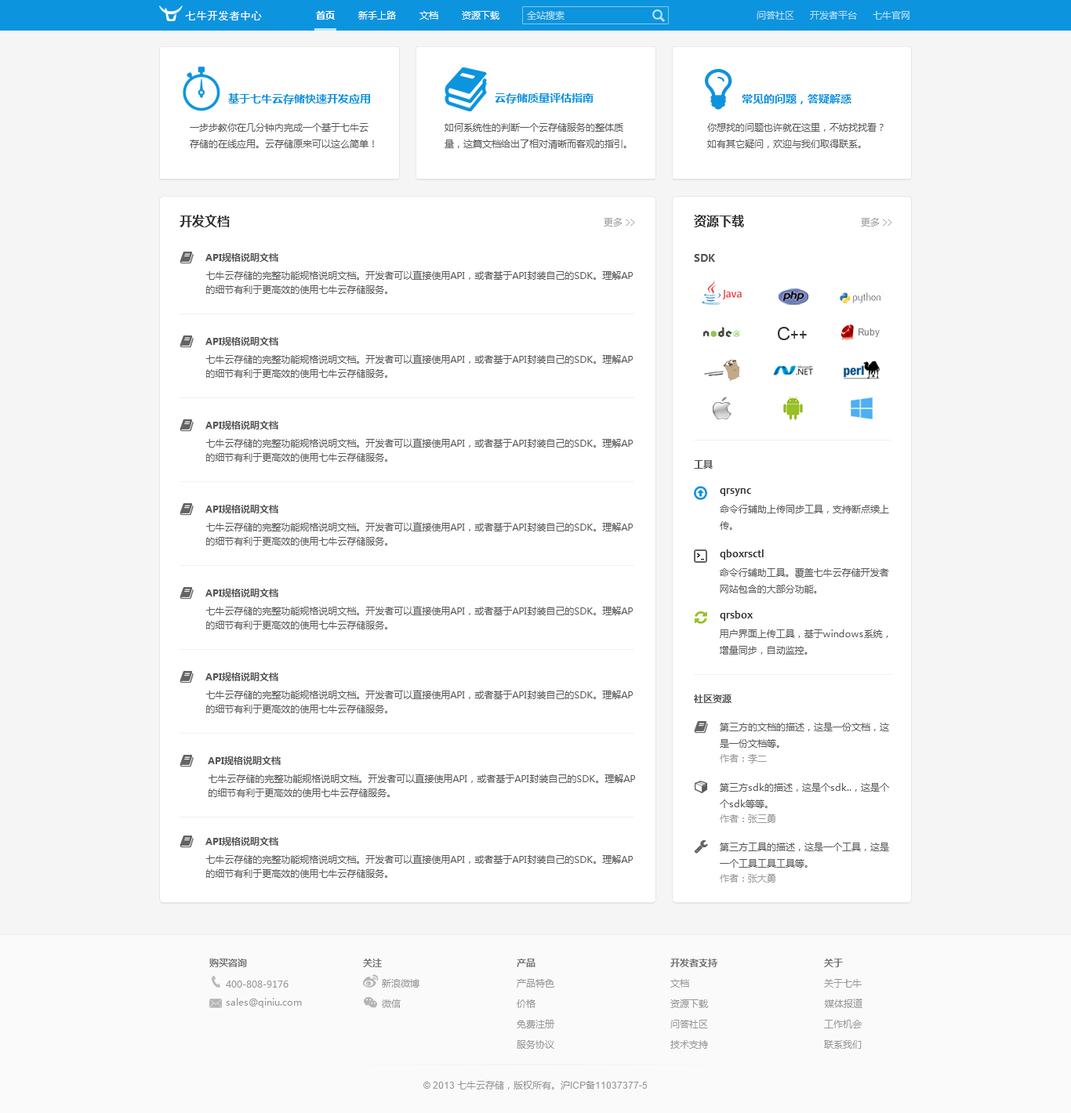
<style>
.page{position:relative;width:1071px;height:1113px;background:#ffffff}
.page>*{position:absolute;margin:0}
.t1{font:11px "SimHei";color:#ffffff}
.t2{font:9.4px "MicrosoftYaHei-Bold";color:#ffffff}
.t3{font:9.4px "MicrosoftYaHei";color:#ffffff}
.t4{font:9.4px "MicrosoftYaHei";color:#b7dff5}
.t5{font:11px "MicrosoftYaHei-Bold";color:#0c94de}
.t6{font:9.4px "MicrosoftYaHei";color:#585858}
.t7{font:12.5px "MicrosoftYaHei-Bold";color:#323232}
.t8{font:9.4px "MicrosoftYaHei";color:#a0a0a0}
.t9{font:9.4px "SimHei";color:#a0a0a0}
.t10{font:9.4px "MicrosoftYaHei-Bold";color:#585858}
.t11{font:10.2px "MicrosoftYaHei-Bold";color:#585858}
.t12{font:9.4px/14.1px "MicrosoftYaHei";color:#585858}
.t13{font:18.8px "ArialMT";color:#323232}
.t14{font:9.4px "ArialMT";color:#808080}
.t15{font:14.1px "ArialMT";color:#323232}
.t16{font:11px "Candara-Bold";color:#323232}
.t17{font:9.4px "MicrosoftYaHei";color:#999999}
.t18{font:9.4px "MicrosoftYaHei-Bold";color:#787878}
.t19{font:9.4px "MicrosoftYaHei";color:#969696}
.t20{font:9.4px "ArialMT";color:#969696}
</style>
<div class="page">
<p class="t1" style="left:185px;top:11px;width:77px;height:10px">七牛开发者中心</p>
<p class="t2" style="left:316px;top:11px;width:19px;height:9px">首页</p>
<p class="t3" style="left:358px;top:11px;width:38px;height:9px">新手上路</p>
<p class="t3" style="left:419px;top:11px;width:19px;height:9px">文档</p>
<p class="t3" style="left:462px;top:11px;width:37px;height:9px">资源下载</p>
<p class="t4" style="left:527px;top:11px;width:38px;height:9px">全站搜索</p>
<p class="t4" style="left:757px;top:11px;width:37px;height:9px">问答社区</p>
<p class="t4" style="left:810px;top:11px;width:47px;height:9px">开发者平台</p>
<p class="t4" style="left:873px;top:11px;width:37px;height:9px">七牛官网</p>
<p class="t5" style="left:228px;top:93px;width:142px;height:11px">基于七牛云存储快速开发应用</p>
<p class="t5" style="left:495px;top:93px;width:99px;height:10px">云存储质量评估指南</p>
<p class="t5" style="left:742px;top:94px;width:109px;height:10px">常见的问题，答疑解惑</p>
<p class="t6" style="left:190px;top:123px;width:184px;height:25px">一步步教你在几分钟内完成一个基于七牛云<br>存储的在线应用。云存储原来可以这么简单！</p>
<p class="t6" style="left:445px;top:123px;width:181px;height:26px">如何系统性的判断一个云存储服务的整体质<br>量，这篇文档给出了相对清晰而客观的指引。</p>
<p class="t6" style="left:707px;top:123px;width:177px;height:25px">你想找的问题也许就在这里，不妨找找看？<br>如有其它疑问，欢迎与我们取得联系。</p>
<p class="t7" style="left:180px;top:215px;width:50px;height:12px">开发文档</p>
<p class="t8" style="left:604px;top:218px;width:31px;height:9px">更多 <span class="t9">&gt;&gt;</span></p>
<p class="t7" style="left:694px;top:215px;width:50px;height:12px">资源下载</p>
<p class="t8" style="left:861px;top:218px;width:31px;height:9px">更多 <span class="t9">&gt;&gt;</span></p>
<p class="t10" style="left:205px;top:253px;width:73px;height:9px">API规格说明文档</p>
<p class="t11" style="left:694px;top:254px;width:21px;height:8px">SDK</p>
<p class="t12" style="left:205px;top:270px;width:428px;height:24px">七牛云存储的完整功能规格说明文档。开发者可以直接使用API，或者基于API封装自己的SDK。理解AP<br>的细节有利于更高效的使用七牛云存储服务。</p>
<p class="t13" style="left:778px;top:327px;width:12px;height:13px">C</p>
<p class="t14" style="left:859px;top:329px;width:21px;height:8px">Ruby</p>
<p class="t10" style="left:205px;top:337px;width:73px;height:9px">API规格说明文档</p>
<p class="t15" style="left:791px;top:331px;width:16px;height:8px">++</p>
<p class="t12" style="left:205px;top:354px;width:428px;height:24px">七牛云存储的完整功能规格说明文档。开发者可以直接使用API，或者基于API封装自己的SDK。理解AP<br>的细节有利于更高效的使用七牛云存储服务。</p>
<p class="t10" style="left:205px;top:421px;width:73px;height:9px">API规格说明文档</p>
<p class="t12" style="left:205px;top:438px;width:428px;height:24px">七牛云存储的完整功能规格说明文档。开发者可以直接使用API，或者基于API封装自己的SDK。理解AP<br>的细节有利于更高效的使用七牛云存储服务。</p>
<p class="t10" style="left:694px;top:460px;width:19px;height:9px">工具</p>
<p class="t16" style="left:720px;top:488px;width:31px;height:8px">qrsync</p>
<p class="t10" style="left:205px;top:505px;width:73px;height:9px">API规格说明文档</p>
<p class="t6" style="left:720px;top:505px;width:169px;height:25px">命令行辅助上传同步工具，支持断点续上<br>传。</p>
<p class="t12" style="left:205px;top:522px;width:428px;height:24px">七牛云存储的完整功能规格说明文档。开发者可以直接使用API，或者基于API封装自己的SDK。理解AP<br>的细节有利于更高效的使用七牛云存储服务。</p>
<p class="t16" style="left:720px;top:550px;width:44px;height:10px">qboxrsctl</p>
<p class="t6" style="left:720px;top:568px;width:169px;height:26px">命令行辅助工具。覆盖七牛云存储开发者<br>网站包含的大部分功能。</p>
<p class="t10" style="left:205px;top:589px;width:73px;height:8px">API规格说明文档</p>
<p class="t12" style="left:205px;top:606px;width:428px;height:24px">七牛云存储的完整功能规格说明文档。开发者可以直接使用API，或者基于API封装自己的SDK。理解AP<br>的细节有利于更高效的使用七牛云存储服务。</p>
<p class="t16" style="left:720px;top:611px;width:33px;height:10px">qrsbox</p>
<p class="t6" style="left:720px;top:630px;width:168px;height:25px">用户界面上传工具，基于windows系统，<br>增量同步，自动监控。</p>
<p class="t10" style="left:205px;top:673px;width:73px;height:8px">API规格说明文档</p>
<p class="t12" style="left:205px;top:690px;width:428px;height:23px">七牛云存储的完整功能规格说明文档。开发者可以直接使用API，或者基于API封装自己的SDK。理解AP<br>的细节有利于更高效的使用七牛云存储服务。</p>
<p class="t10" style="left:694px;top:695px;width:38px;height:8px">社区资源</p>
<p class="t6" style="left:720px;top:723px;width:169px;height:25px">第三方的文档的描述，这是一份文档，这<br>是一份文档等。</p>
<p class="t10" style="left:208px;top:757px;width:73px;height:8px">API规格说明文档</p>
<p class="t17" style="left:720px;top:754px;width:47px;height:10px">作者：李二</p>
<p class="t12" style="left:208px;top:774px;width:427px;height:23px">七牛云存储的完整功能规格说明文档。开发者可以直接使用API，或者基于API封装自己的SDK。理解AP<br>的细节有利于更高效的使用七牛云存储服务。</p>
<p class="t6" style="left:720px;top:783px;width:169px;height:25px">第三方sdk的描述，这是个sdk..，这是个<br>个sdk等等。</p>
<p class="t17" style="left:720px;top:815px;width:55px;height:8px">作者：张三勇</p>
<p class="t10" style="left:205px;top:837px;width:73px;height:9px">API规格说明文档</p>
<p class="t6" style="left:720px;top:843px;width:169px;height:25px">第三方工具的描述，这是一个工具，这是<br>一个工具工具工具等。</p>
<p class="t12" style="left:205px;top:855px;width:428px;height:23px">七牛云存储的完整功能规格说明文档。开发者可以直接使用API，或者基于API封装自己的SDK。理解AP<br>的细节有利于更高效的使用七牛云存储服务。</p>
<p class="t17" style="left:720px;top:874px;width:55px;height:9px">作者：张大勇</p>
<p class="t18" style="left:209px;top:959px;width:38px;height:9px">购买咨询</p>
<p class="t18" style="left:363px;top:959px;width:19px;height:9px">关注</p>
<p class="t18" style="left:517px;top:959px;width:19px;height:9px">产品</p>
<p class="t18" style="left:670px;top:959px;width:47px;height:9px">开发者支持</p>
<p class="t18" style="left:824px;top:959px;width:19px;height:9px">关于</p>
<p class="t19" style="left:226px;top:981px;width:63px;height:7px">400-808-9176</p>
<p class="t19" style="left:382px;top:979px;width:37px;height:9px">新浪微博</p>
<p class="t19" style="left:517px;top:979px;width:37px;height:9px">产品特色</p>
<p class="t19" style="left:670px;top:979px;width:19px;height:9px">文档</p>
<p class="t19" style="left:824px;top:979px;width:38px;height:9px">关于七牛</p>
<p class="t19" style="left:226px;top:998px;width:76px;height:10px">sales@qiniu.com</p>
<p class="t19" style="left:382px;top:1000px;width:19px;height:8px">微信</p>
<p class="t19" style="left:517px;top:1000px;width:19px;height:8px">价格</p>
<p class="t19" style="left:670px;top:1000px;width:38px;height:8px">资源下载</p>
<p class="t19" style="left:824px;top:999px;width:38px;height:9px">媒体报道</p>
<p class="t19" style="left:517px;top:1020px;width:37px;height:9px">免费注册</p>
<p class="t19" style="left:670px;top:1020px;width:38px;height:9px">问答社区</p>
<p class="t19" style="left:824px;top:1020px;width:38px;height:9px">工作机会</p>
<p class="t19" style="left:517px;top:1040px;width:37px;height:9px">服务协议</p>
<p class="t19" style="left:670px;top:1040px;width:38px;height:9px">技术支持</p>
<p class="t19" style="left:824px;top:1040px;width:38px;height:9px">联系我们</p>
<p class="t19" style="left:423px;top:1081px;width:225px;height:9px"><span class="t20">© 2013 </span>七牛云存储，版权所有。沪<span class="t20">ICP</span>备<span class="t20">11037377-5</span></p>
</div>
